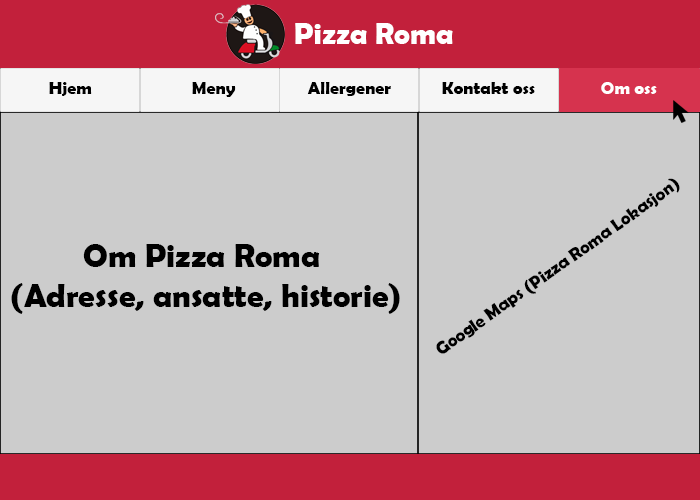
<style>
.page{position:relative;width:700px;height:500px;background:#cccccc}
.page>*{position:absolute;margin:0}
.t1{font:30px "BerlinSansFBDemi-Bold";color:#ffffff}
.t2{font:18px "BerlinSansFBDemi-Bold";color:#000000}
.t3{font:18px "BerlinSansFBDemi-Bold";color:#ffffff}
.t4{font:33px "BerlinSansFBDemi-Bold";color:#000000}
</style>
<div class="page">
<p class="t1" style="left:295px;top:23px;width:158px;height:21px">Pizza Roma</p>
<p class="t2" style="left:49px;top:82px;width:43px;height:14px">Hjem</p>
<p class="t2" style="left:192px;top:82px;width:44px;height:15px">Meny</p>
<p class="t2" style="left:307px;top:82px;width:84px;height:14px">Allergener</p>
<p class="t2" style="left:442px;top:82px;width:93px;height:12px">Kontakt oss</p>
<p class="t3" style="left:601px;top:82px;width:56px;height:12px">Om oss</p>
<p class="t2" style="left:436px;top:178px;width:244px;height:176px;rotate:-35deg">Google Maps (Pizza Roma Lokasjon)</p>
<p class="t4" style="left:11px;top:244px;width:389px;height:70px;text-align:center">Om Pizza Roma <br>(Adresse, ansatte, historie)</p>
</div>
